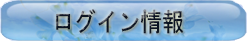
<style>
.page{position:relative;width:247px;height:41px}
.page>*{position:absolute;margin:0}
.t1{font:26.1px "MS-Gothic";scale:0.84 1}
</style>
<div class="page">
<p class="t1" style="left:56px;top:9px;width:128px;height:25px">ログイン情報</p>
</div>
